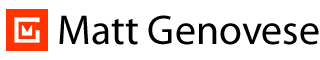
<style>
.page{position:relative;width:320px;height:60px;background:#ffffff}
.page>*{position:absolute;margin:0}
.t1{font:41.8px "MyriadPro-Regular";color:#000000}
</style>
<div class="page">
<p class="t1" style="left:59px;top:15px;width:260px;height:30px">Matt Genovese</p>
</div>
